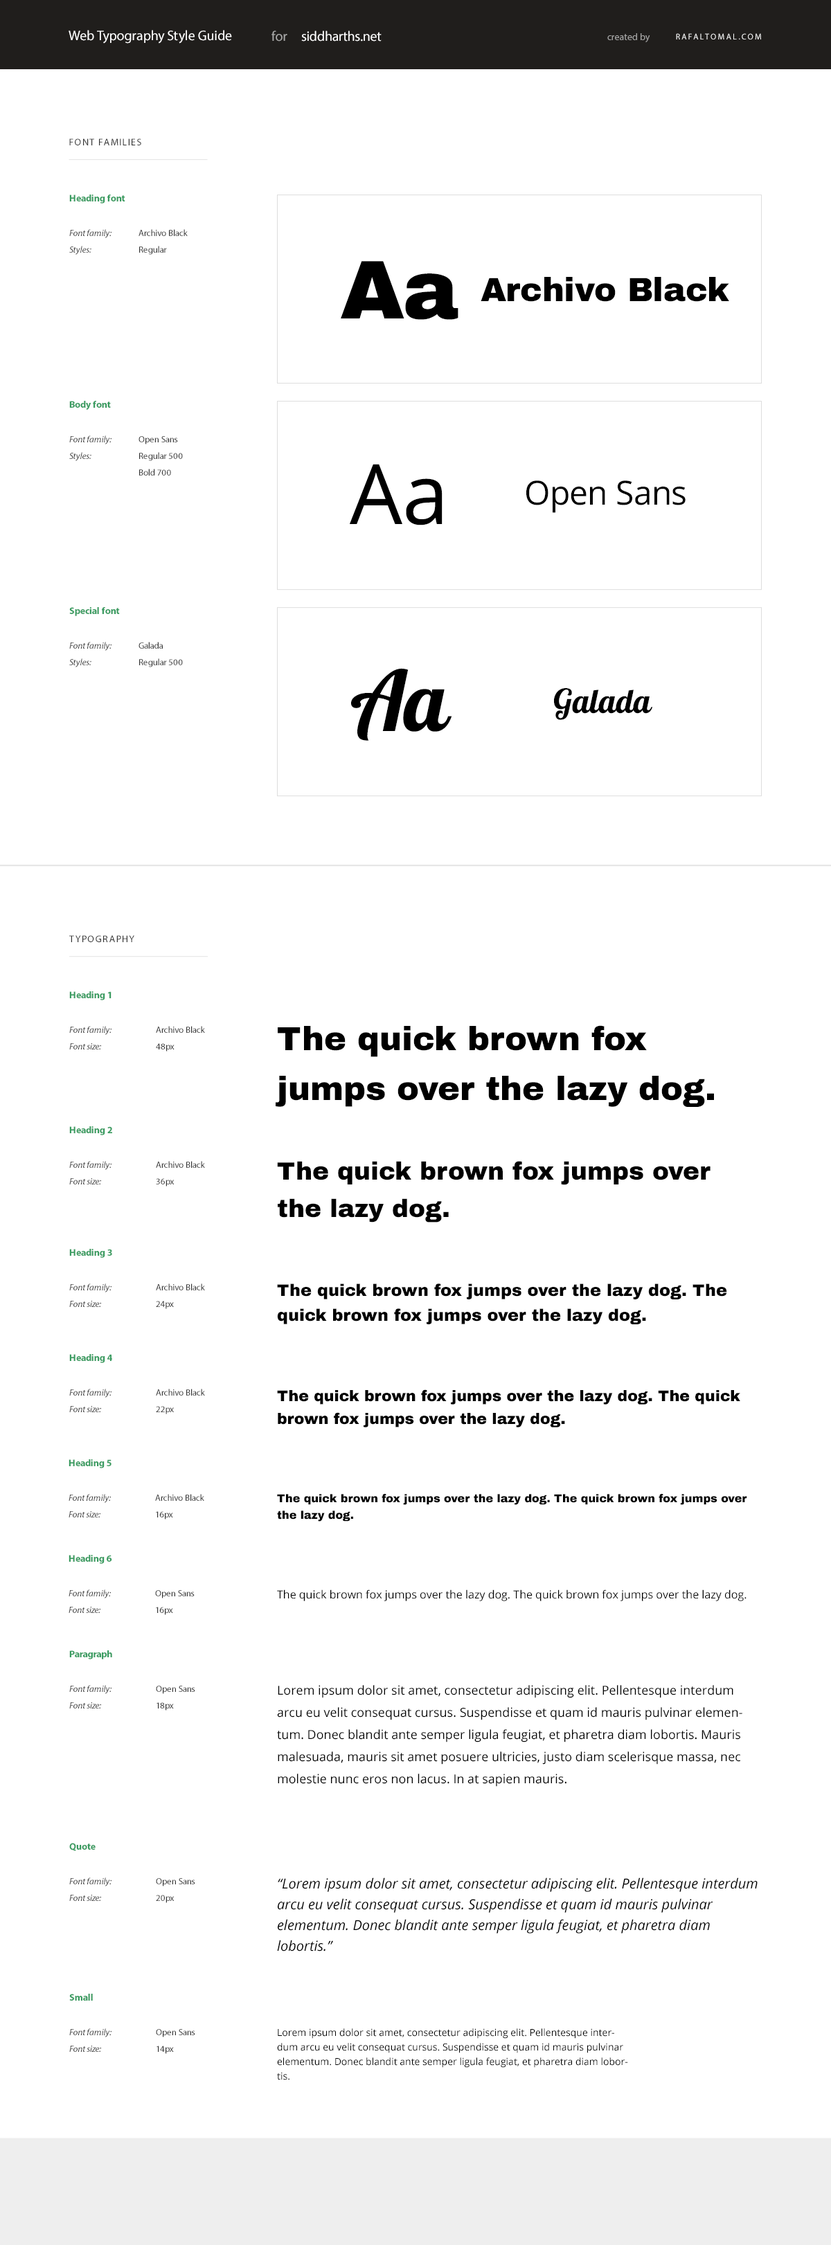
<style>
.page{position:relative;width:831px;height:2245px;background:#ffffff}
.page>*{position:absolute;margin:0}
.t1{font:13.8px "MyriadPro-Regular";color:#ffffff}
.t2{font:13.8px "MyriadPro-Regular";color:#a9a9a8}
.t3{font:9.7px "MyriadPro-Regular";color:#a9a9a8}
.t4{font:8.3px "MyriadPro-Regular";letter-spacing:0.2em;color:#ffffff;text-transform:uppercase}
.t5{font:9.7px "MyriadPro-Regular";letter-spacing:0.1em;color:#333333;text-transform:uppercase}
.t6{font:9.7px "MyriadPro-Bold";color:#3a9c61}
.t7{font:9px/13.8px "MyriadPro-It";color:#333333}
.t8{font:9px/13.8px "MyriadPro-Regular";color:#333333}
.t9{font:83.1px "ArchivoBlack-Regular";color:#000000}
.t10{font:33.2px "ArchivoBlack-Regular";color:#000000}
.t11{font:83.1px "OpenSans";color:#000000}
.t12{font:33.2px "OpenSans";color:#000000}
.t13{font:83.1px "Galada-Regular";color:#000000}
.t14{font:33.2px "Galada-Regular";color:#000000}
.t15{font:8.3px "MyriadPro-Regular";color:#000000}
</style>
<div class="page">
<p class="t1" style="left:69px;top:30px;width:163px;height:14px">Web Typography Style Guide</p>
<p class="t2" style="left:271px;top:30px;width:16px;height:12px">for</p>
<p class="t1" style="left:301px;top:30px;width:80px;height:12px">siddharths.net</p>
<p class="t3" style="left:607px;top:33px;width:43px;height:9px">created by</p>
<p class="t4" style="left:676px;top:33px;width:85px;height:6px">RafalTomal.com</p>
<p class="t5" style="left:69px;top:138px;width:72px;height:7px">font families</p>
<p class="t6" style="left:69px;top:195px;width:56px;height:9px">Heading font</p>
<p class="t7" style="left:69px;top:229px;width:42px;height:26px">Font family:<br>Styles:</p>
<p class="t8" style="left:138px;top:229px;width:50px;height:26px">Archivo Black<br>Regular</p>
<p class="t9" style="left:341px;top:261px;width:117px;height:59px">Aa</p>
<p class="t10" style="left:480px;top:277px;width:249px;height:25px">Archivo Black</p>
<p class="t6" style="left:69px;top:401px;width:42px;height:9px">Body font</p>
<p class="t7" style="left:69px;top:435px;width:42px;height:26px">Font family:<br>Styles:</p>
<p class="t8" style="left:138px;top:436px;width:45px;height:40px">Open Sans<br>Regular 500<br>Bold 700</p>
<p class="t11" style="left:350px;top:464px;width:92px;height:61px">Aa</p>
<p class="t12" style="left:526px;top:480px;width:159px;height:33px">Open Sans</p>
<p class="t6" style="left:69px;top:607px;width:51px;height:9px">Special font</p>
<p class="t7" style="left:69px;top:642px;width:42px;height:25px">Font family:<br>Styles:</p>
<p class="t8" style="left:138px;top:642px;width:45px;height:25px">Galada<br>Regular 500</p>
<p class="t13" style="left:351px;top:668px;width:101px;height:73px">Aa</p>
<p class="t14" style="left:554px;top:688px;width:99px;height:32px">Galada</p>
<p class="t5" style="left:69px;top:935px;width:65px;height:7px">Typography</p>
<p class="t6" style="left:69px;top:991px;width:42px;height:9px">Heading 1</p>
<p class="t7" style="left:69px;top:1026px;width:42px;height:23px">Font family:<br>Font size:</p>
<p class="t8" style="left:156px;top:1026px;width:49px;height:25px">Archivo Black<br>48px</p>
<p class="t15" style="left:275px;top:1025px;width:439px;height:82px">The quick brown fox jumps over the lazy dog.</p>
<p class="t6" style="left:69px;top:1126px;width:43px;height:9px">Heading 2</p>
<p class="t7" style="left:69px;top:1161px;width:42px;height:23px">Font family:<br>Font size:</p>
<p class="t8" style="left:156px;top:1161px;width:49px;height:25px">Archivo Black<br>36px</p>
<p class="t15" style="left:277px;top:1161px;width:433px;height:61px">The quick brown fox jumps over the lazy dog.</p>
<p class="t6" style="left:69px;top:1249px;width:43px;height:9px">Heading 3</p>
<p class="t7" style="left:69px;top:1283px;width:42px;height:24px">Font family:<br>Font size:</p>
<p class="t8" style="left:156px;top:1283px;width:49px;height:26px">Archivo Black<br>24px</p>
<p class="t15" style="left:277px;top:1283px;width:450px;height:41px">The quick brown fox jumps over the lazy dog. The quick brown fox jumps over the lazy dog.</p>
<p class="t6" style="left:69px;top:1354px;width:43px;height:9px">Heading 4</p>
<p class="t7" style="left:69px;top:1389px;width:42px;height:23px">Font family:<br>Font size:</p>
<p class="t8" style="left:156px;top:1389px;width:49px;height:25px">Archivo Black<br>22px</p>
<p class="t15" style="left:277px;top:1389px;width:463px;height:38px">The quick brown fox jumps over the lazy dog. The quick brown fox jumps over the lazy dog.</p>
<p class="t6" style="left:69px;top:1459px;width:42px;height:9px">Heading 5</p>
<p class="t7" style="left:69px;top:1494px;width:42px;height:23px">Font family:<br>Font size:</p>
<p class="t8" style="left:155px;top:1494px;width:49px;height:25px">Archivo Black<br>16px</p>
<p class="t15" style="left:277px;top:1494px;width:470px;height:27px">The quick brown fox jumps over the lazy dog. The quick brown fox jumps over the lazy dog.</p>
<p class="t6" style="left:69px;top:1555px;width:43px;height:9px">Heading 6</p>
<p class="t7" style="left:69px;top:1589px;width:42px;height:24px">Font family:<br>Font size:</p>
<p class="t8" style="left:155px;top:1590px;width:40px;height:25px">Open Sans<br>16px</p>
<p class="t15" style="left:277px;top:1589px;width:469px;height:12px">The quick brown fox jumps over the lazy dog. The quick brown fox jumps over the lazy dog.</p>
<p class="t6" style="left:69px;top:1650px;width:43px;height:9px">Paragraph</p>
<p class="t7" style="left:69px;top:1685px;width:42px;height:23px">Font family:<br>Font size:</p>
<p class="t8" style="left:156px;top:1686px;width:39px;height:24px">Open Sans<br>18px</p>
<p class="t15" style="left:277px;top:1685px;width:465px;height:102px">Lorem ipsum dolor sit amet, consectetur adipiscing elit. Pellentesque interdum arcu eu velit consequat cursus. Suspendisse et quam id mauris pulvinar elementum. Donec blandit ante semper ligula feugiat, et pharetra diam lobortis. Mauris malesuada, mauris sit amet posuere ultricies, justo diam scelerisque massa, nec molestie nunc eros non lacus. In at sapien mauris.</p>
<p class="t6" style="left:69px;top:1843px;width:27px;height:8px">Quote</p>
<p class="t7" style="left:69px;top:1877px;width:42px;height:24px">Font family:<br>Font size:</p>
<p class="t8" style="left:156px;top:1878px;width:39px;height:25px">Open Sans<br>20px</p>
<p class="t15" style="left:277px;top:1877px;width:480px;height:74px">“Lorem ipsum dolor sit amet, consectetur adipiscing elit. Pellentesque interdum arcu eu velit consequat cursus. Suspendisse et quam id mauris pulvinar elementum. Donec blandit ante semper ligula feugiat, et pharetra diam lobortis.”</p>
<p class="t6" style="left:69px;top:1994px;width:24px;height:6px">Small</p>
<p class="t7" style="left:69px;top:2028px;width:42px;height:24px">Font family:<br>Font size:</p>
<p class="t8" style="left:156px;top:2029px;width:39px;height:25px">Open Sans<br>14px</p>
<p class="t15" style="left:277px;top:2028px;width:351px;height:52px">Lorem ipsum dolor sit amet, consectetur adipiscing elit. Pellentesque interdum arcu eu velit consequat cursus. Suspendisse et quam id mauris pulvinar elementum. Donec blandit ante semper ligula feugiat, et pharetra diam lobortis.</p>
</div>
